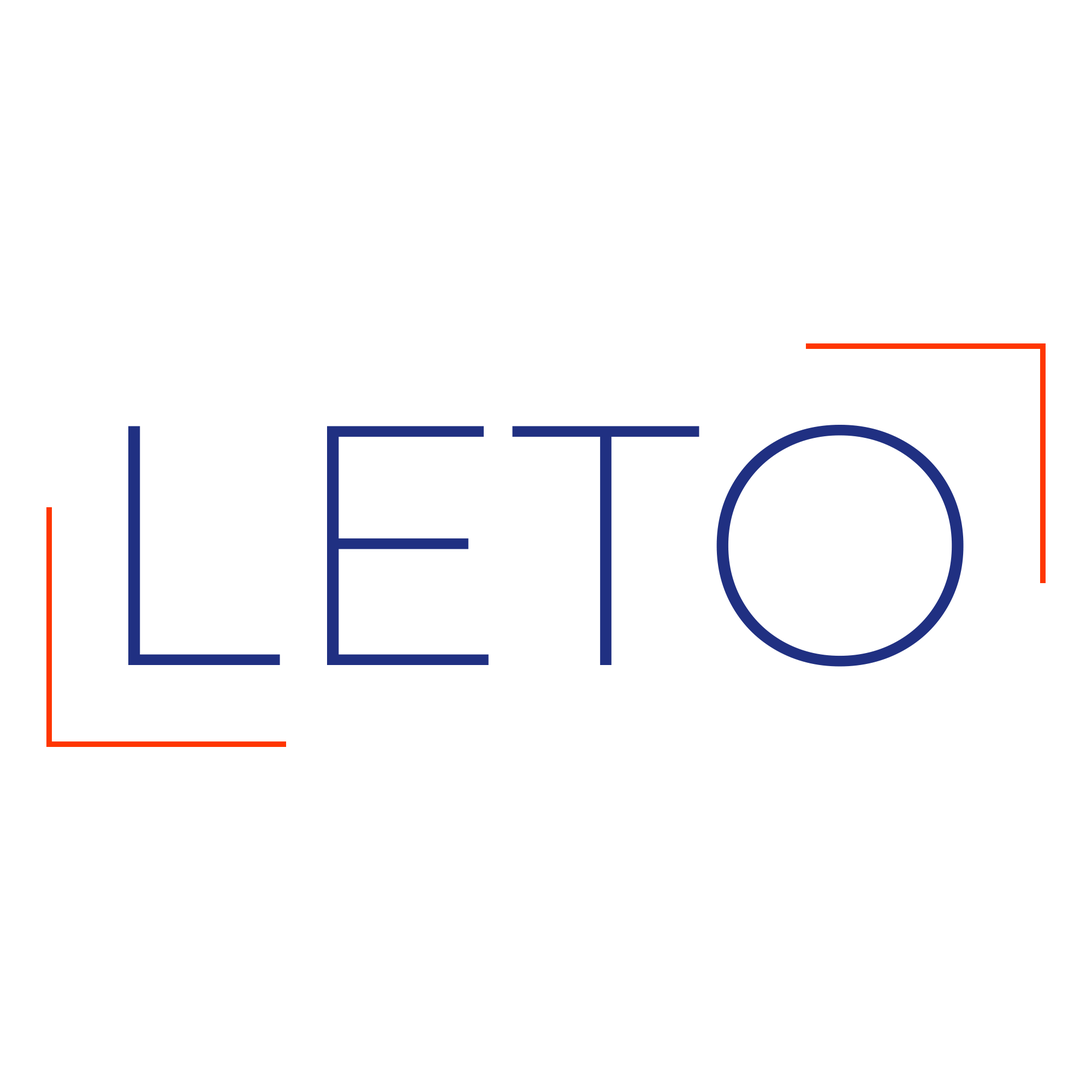
<style>
.page{position:relative;width:1092px;height:1092px;background:#ffffff}
.page>*{position:absolute;margin:0}
.t1{font:341.2px "Montserrat-ExtraLight";color:#203082}
</style>
<div class="page">
<p class="t1" style="left:128px;top:425px;width:836px;height:242px">LETO</p>
</div>
